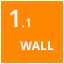
<style>
.page{position:relative;width:64px;height:64px;background:#ff8800}
.page>*{position:absolute;margin:0}
.t1{font:12px "OpenSans-Semibold";color:#ffffff}
.t2{font:24px "OpenSans-Semibold";color:#ffffff}
.t3{font:12px "OpenSans-Bold";color:#ffffff}
</style>
<div class="page">
<p class="t1" style="left:9px;top:9px;width:21px;height:19px"><span class="t2">1</span>.1</p>
<p class="t3" style="left:20px;top:41px;width:34px;height:9px">WALL</p>
</div>
